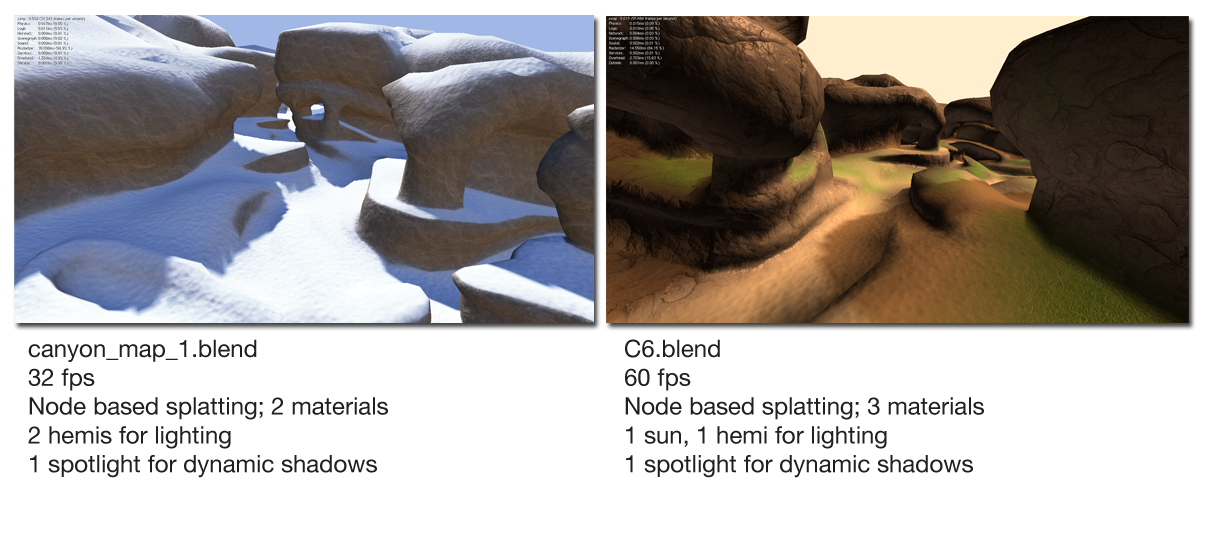
<style>
.page{position:relative;width:1206px;height:542px;background:#ffffff}
.page>*{position:absolute;margin:0}
.t1{font:24px "HelveticaNeue";color:#202020}
</style>
<div class="page">
<p class="t1" style="left:28px;top:339px;width:360px;height:139px">canyon_map_1.blend<br>32 fps<br>Node based splatting; 2 materials<br>2 hemis for lighting<br>1 spotlight for dynamic shadows</p>
<p class="t1" style="left:625px;top:339px;width:359px;height:139px">C6.blend<br>60 fps<br>Node based splatting; 3 materials<br>1 sun, 1 hemi for lighting<br>1 spotlight for dynamic shadows</p>
</div>
